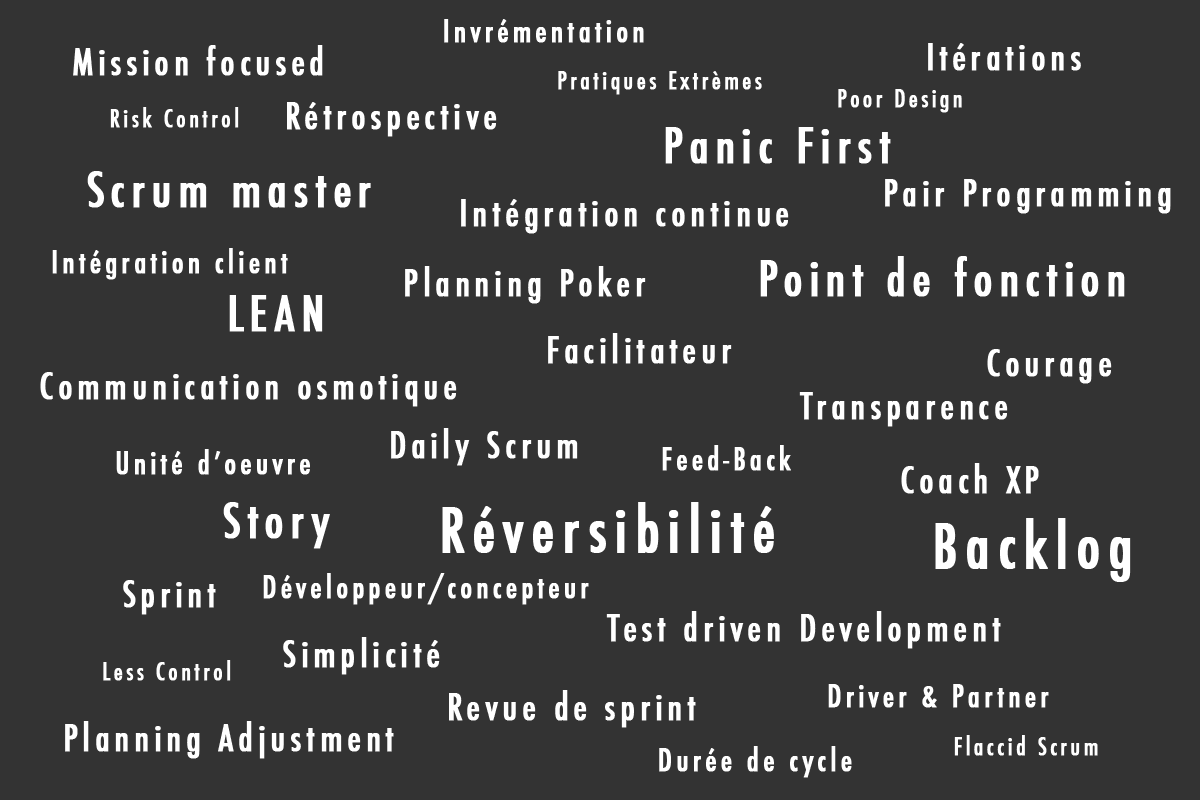
<style>
.page{position:relative;width:1200px;height:800px;background:#333333}
.page>*{position:absolute;margin:0}
.t1{font:30px "Futura-CondensedMedium";letter-spacing:0.12em;color:#ffffff;font-weight:bold}
.t2{font:36px "Futura-CondensedMedium";letter-spacing:0.12em;color:#ffffff;font-weight:bold}
.t3{font:24px "Futura-CondensedMedium";letter-spacing:0.12em;color:#ffffff;font-weight:bold}
.t4{font:48px "Futura-CondensedMedium";letter-spacing:0.12em;color:#ffffff;font-weight:bold}
.t5{font:60px "Futura-CondensedMedium";letter-spacing:0.12em;color:#ffffff;font-weight:bold}
</style>
<div class="page">
<p class="t1" style="left:444px;top:19px;width:200px;height:24px">Invrémentation</p>
<p class="t2" style="left:73px;top:45px;width:250px;height:31px">Mission focused</p>
<p class="t2" style="left:928px;top:43px;width:153px;height:28px">Itérations</p>
<p class="t3" style="left:558px;top:71px;width:204px;height:24px">Pratiques Extrèmes</p>
<p class="t3" style="left:838px;top:89px;width:124px;height:24px">Poor Design</p>
<p class="t2" style="left:287px;top:102px;width:210px;height:35px">Rétrospective</p>
<p class="t3" style="left:110px;top:107px;width:129px;height:21px">Risk Control</p>
<p class="t4" style="left:665px;top:127px;width:226px;height:37px">Panic First</p>
<p class="t4" style="left:87px;top:171px;width:284px;height:37px">Scrum master</p>
<p class="t2" style="left:885px;top:179px;width:286px;height:35px">Pair Programming</p>
<p class="t2" style="left:461px;top:199px;width:328px;height:35px">Intégration continue</p>
<p class="t1" style="left:52px;top:248px;width:236px;height:32px">Intégration client</p>
<p class="t4" style="left:760px;top:256px;width:365px;height:41px">Point de fonction</p>
<p class="t2" style="left:405px;top:266px;width:241px;height:38px">Planning Poker</p>
<p class="t4" style="left:229px;top:295px;width:94px;height:37px">LEAN</p>
<p class="t2" style="left:548px;top:333px;width:184px;height:31px">Facilitateur</p>
<p class="t2" style="left:987px;top:349px;width:125px;height:35px">Courage</p>
<p class="t2" style="left:40px;top:372px;width:417px;height:35px">Communication osmotique</p>
<p class="t2" style="left:799px;top:392px;width:209px;height:35px">Transparence</p>
<p class="t2" style="left:391px;top:428px;width:187px;height:38px">Daily Scrum</p>
<p class="t1" style="left:116px;top:449px;width:194px;height:26px">Unité d’oeuvre</p>
<p class="t1" style="left:662px;top:445px;width:129px;height:26px">Feed-Back</p>
<p class="t2" style="left:901px;top:463px;width:138px;height:31px">Coach XP</p>
<p class="t4" style="left:223px;top:502px;width:107px;height:47px">Story</p>
<p class="t5" style="left:442px;top:502px;width:332px;height:51px">Réversibilité</p>
<p class="t5" style="left:935px;top:518px;width:196px;height:64px">Backlog</p>
<p class="t2" style="left:123px;top:580px;width:93px;height:35px">Sprint</p>
<p class="t1" style="left:263px;top:573px;width:326px;height:32px">Développeur/concepteur</p>
<p class="t2" style="left:606px;top:611px;width:395px;height:38px">Test driven Development</p>
<p class="t2" style="left:283px;top:637px;width:157px;height:38px">Simplicité</p>
<p class="t3" style="left:103px;top:660px;width:128px;height:21px">Less Control</p>
<p class="t1" style="left:828px;top:684px;width:221px;height:24px">Driver &amp; Partner</p>
<p class="t2" style="left:449px;top:690px;width:247px;height:38px">Revue de sprint</p>
<p class="t2" style="left:65px;top:721px;width:329px;height:38px">Planning Adjustment</p>
<p class="t3" style="left:954px;top:735px;width:144px;height:21px">Flaccid Scrum</p>
<p class="t1" style="left:659px;top:746px;width:193px;height:32px">Durée de cycle</p>
</div>
